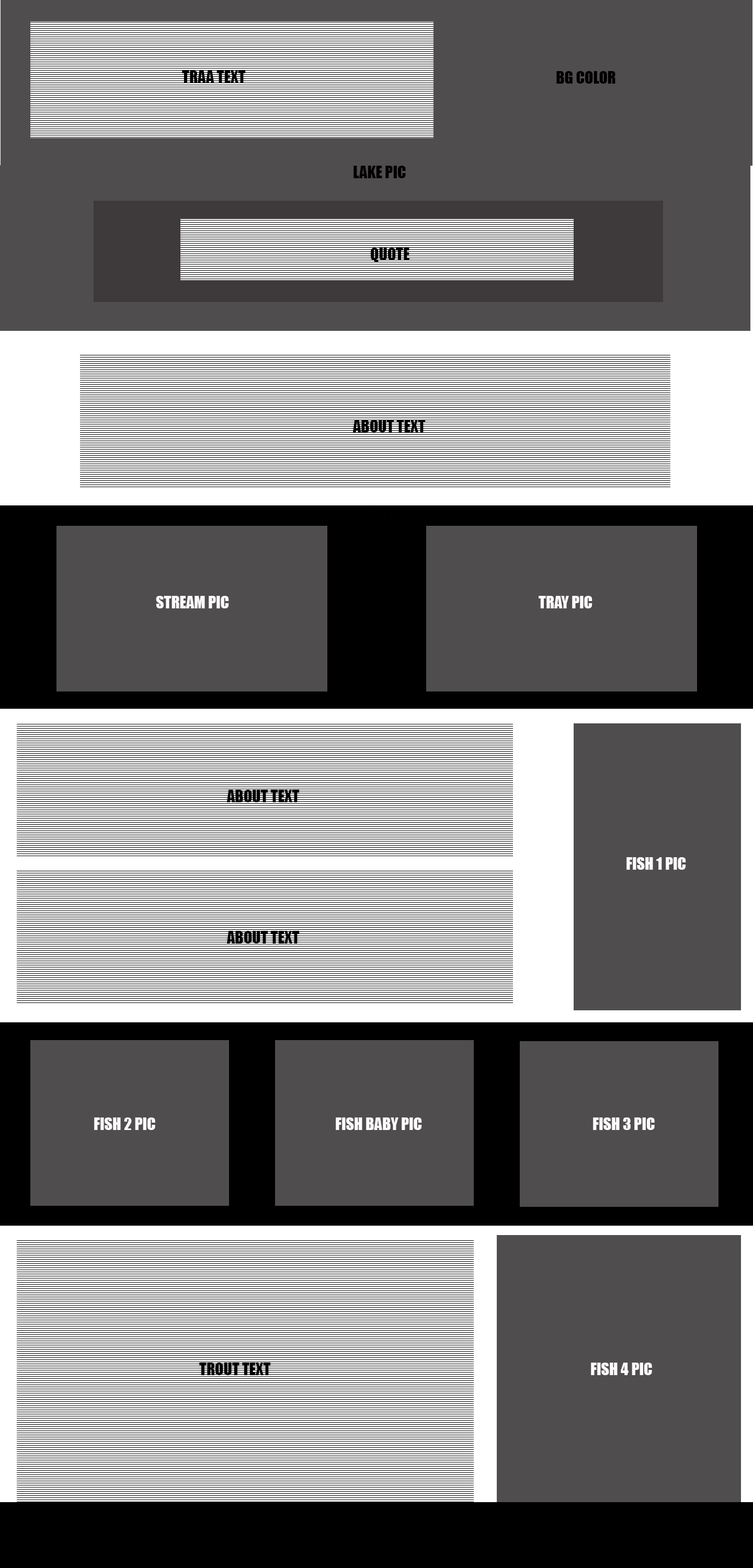
<style>
.page{position:relative;width:753px;height:1568px;background:#4f4d4d}
.page>*{position:absolute;margin:0}
.t1{font:15.7px "Impact";color:#020001}
.t2{font:15.7px "Impact";color:#fefafb}
</style>
<div class="page">
<p class="t1" style="left:182px;top:71px;width:64px;height:12px">TRAA TEXT</p>
<p class="t1" style="left:556px;top:71px;width:59px;height:13px">BG COLOR</p>
<p class="t1" style="left:353px;top:166px;width:53px;height:12px">LAKE PIC</p>
<p class="t1" style="left:371px;top:248px;width:38px;height:14px">QUOTE</p>
<p class="t1" style="left:352px;top:420px;width:73px;height:12px">ABOUT TEXT</p>
<p class="t2" style="left:156px;top:596px;width:73px;height:12px">STREAM PIC</p>
<p class="t2" style="left:538px;top:596px;width:54px;height:12px">TRAY PIC</p>
<p class="t1" style="left:226px;top:790px;width:73px;height:12px">ABOUT TEXT</p>
<p class="t2" style="left:626px;top:857px;width:60px;height:13px">FISH 1 PIC</p>
<p class="t1" style="left:226px;top:931px;width:73px;height:12px">ABOUT TEXT</p>
<p class="t2" style="left:94px;top:1117px;width:61px;height:13px">FISH 2 PIC</p>
<p class="t2" style="left:336px;top:1117px;width:86px;height:13px">FISH BABY PIC</p>
<p class="t2" style="left:593px;top:1117px;width:61px;height:13px">FISH 3 PIC</p>
<p class="t1" style="left:199px;top:1363px;width:72px;height:12px">TROUT TEXT</p>
<p class="t2" style="left:591px;top:1363px;width:61px;height:12px">FISH 4 PIC</p>
</div>
